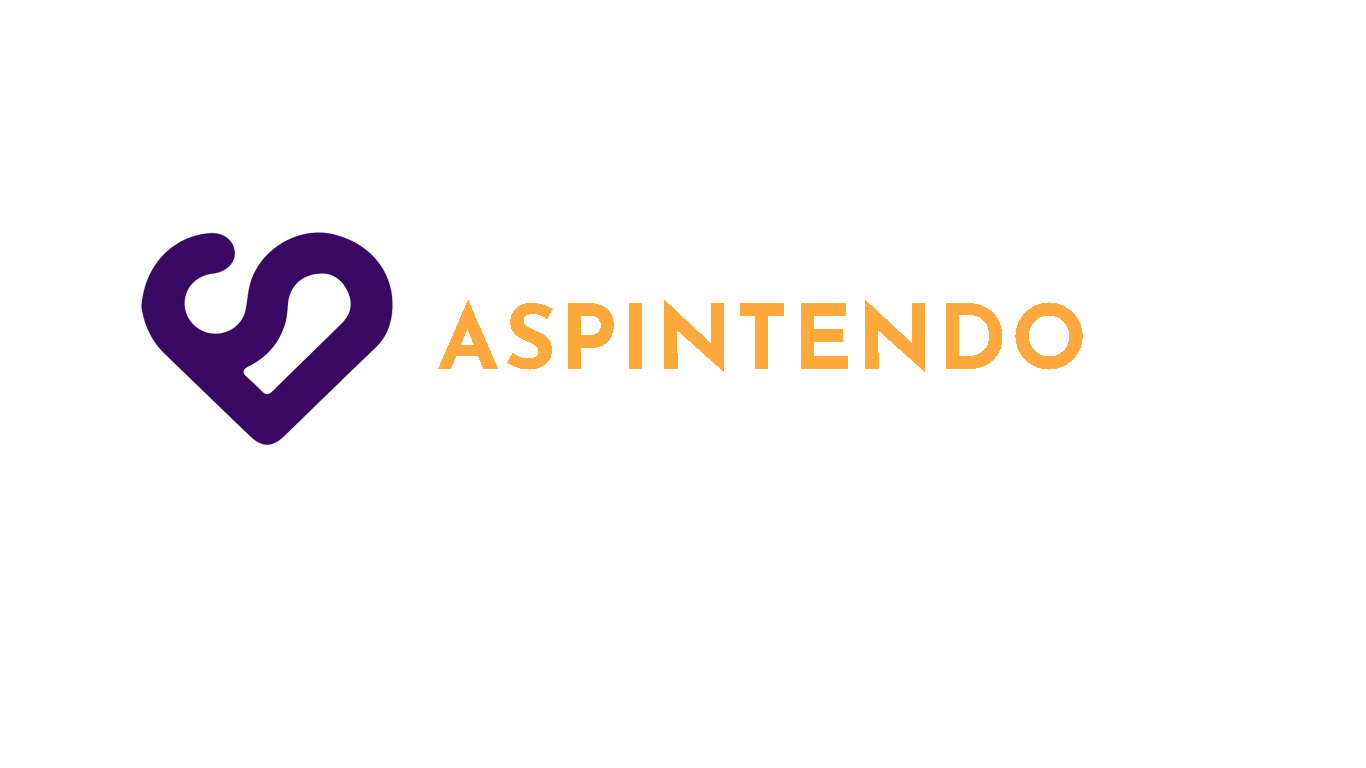
<style>
.page{position:relative;width:1366px;height:768px;background:#ffffff}
.page>*{position:absolute;margin:0}
.t1{font:89.3px "JosefinSans-Bold";letter-spacing:0.05em;color:#ffa83b}
</style>
<div class="page">
<p class="t1" style="left:438px;top:300px;width:645px;height:72px">ASPINTENDO</p>
</div>
